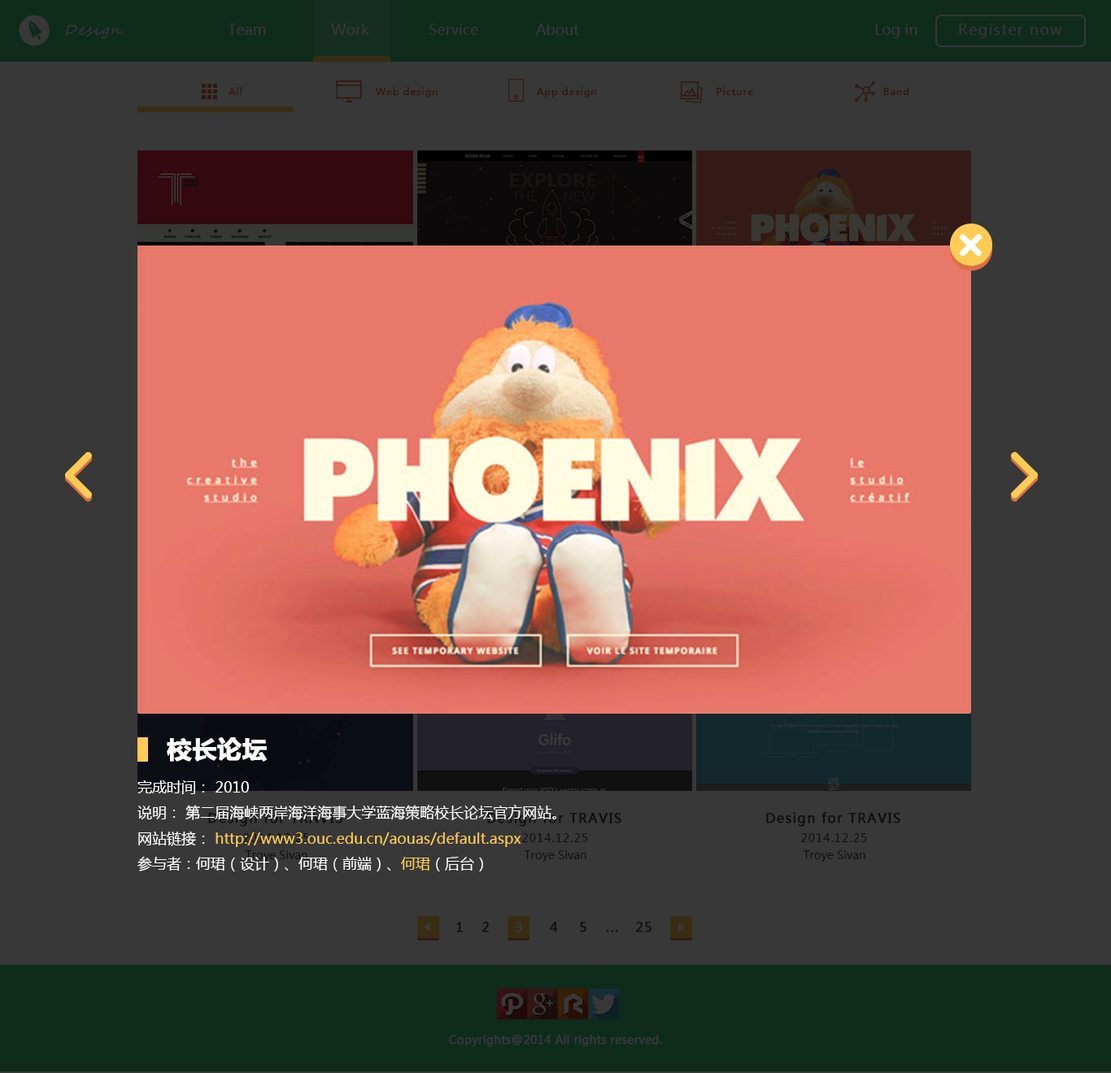
<style>
.page{position:relative;width:1111px;height:1073px;background:#383838}
.page>*{position:absolute;margin:0}
.t1{font:14.6px "SegoeScript";letter-spacing:0.075em;color:#383638;font-style:italic}
.t2{font:14.6px "MicrosoftYaHei";color:#383838}
.t3{font:14.6px "MicrosoftYaHei";letter-spacing:0.075em;color:#383638}
.t4{font:9.8px "MicrosoftYaHei";letter-spacing:0.075em;color:#30160b}
.t5{font:14.6px "MicrosoftYaHei";color:#ffffff}
.t6{font:24.4px "MicrosoftYaHei-Bold";color:#ffffff;font-weight:bold}
.t7{font:14.6px "MicrosoftYaHei";color:#fdcb56}
.t8{font:13px "MicrosoftYaHei";letter-spacing:0.075em;color:#0f0e0e;font-weight:bold}
.t9{font:11.4px "MicrosoftYaHei";letter-spacing:0.075em}
.t10{font:11.4px "MicrosoftYaHei";letter-spacing:0.075em;color:#0f0e0e}
.t11{font:11.4px "MicrosoftYaHei";color:#0f0e0d}
.t12{font:13px "MicrosoftYaHei";letter-spacing:0.075em;color:#101011;font-weight:bold}
.t13{font:13px "MicrosoftYaHei";letter-spacing:0.075em;color:#383838;font-weight:bold}
.t14{font:11.4px "MicrosoftYaHei";color:#383838;font-weight:bold}
</style>
<div class="page">
<p class="t1" style="left:65px;top:24px;width:59px;height:15px">Design</p>
<p class="t2" style="left:228px;top:24px;width:38px;height:11px">Team</p>
<p class="t2" style="left:331px;top:24px;width:38px;height:11px">Work</p>
<p class="t2" style="left:429px;top:24px;width:49px;height:11px">Service</p>
<p class="t2" style="left:536px;top:24px;width:43px;height:11px">About</p>
<p class="t2" style="left:875px;top:24px;width:42px;height:14px">Log in</p>
<p class="t3" style="left:959px;top:24px;width:103px;height:14px">Register now</p>
<p class="t4" style="left:229px;top:87px;width:13px;height:8px">All</p>
<p class="t4" style="left:376px;top:87px;width:62px;height:11px">Web design</p>
<p class="t4" style="left:537px;top:87px;width:59px;height:11px">App design</p>
<p class="t4" style="left:716px;top:87px;width:37px;height:8px">Picture</p>
<p class="t4" style="left:884px;top:87px;width:24px;height:8px">Band</p>
<p class="t5" style="left:137px;top:738px;width:419px;height:134px"><span class="t6"> 校长论坛 <br></span>完成时间： 2010 <br>说明： 第二届海峡两岸海洋海事大学蓝海策略校长论坛官方网站。<br>网站链接： <span class="t7">http://www3.ouc.edu.cn/aouas/default.aspx <br></span>参与者：何珺（设计）、何珺（前端）、<span class="t7">何珺</span>（后台）</p>
<p class="t8" style="left:766px;top:812px;width:134px;height:15px">Design for TRAVIS</p>
<p class="t9" style="left:243px;top:834px;width:66px;height:8px">2014.12.25</p>
<p class="t10" style="left:522px;top:834px;width:66px;height:8px">2014.12.25</p>
<p class="t10" style="left:801px;top:834px;width:66px;height:8px">2014.12.25</p>
<p class="t11" style="left:524px;top:851px;width:62px;height:11px">Troye Sivan</p>
<p class="t11" style="left:803px;top:851px;width:62px;height:11px">Troye Sivan</p>
<p class="t12" style="left:456px;top:922px;width:7px;height:11px">1</p>
<p class="t12" style="left:481px;top:922px;width:8px;height:11px">2</p>
<p class="t13" style="left:516px;top:922px;width:6px;height:11px">3</p>
<p class="t12" style="left:550px;top:922px;width:8px;height:11px">4</p>
<p class="t12" style="left:580px;top:922px;width:6px;height:11px">5</p>
<p class="t12" style="left:635px;top:922px;width:16px;height:11px">25</p>
<p class="t12" style="left:606px;top:930px;width:12px;height:3px">...</p>
<p class="t14" style="left:449px;top:1035px;width:213px;height:12px">Copyrights@2014 All rights reserved.</p>
</div>
